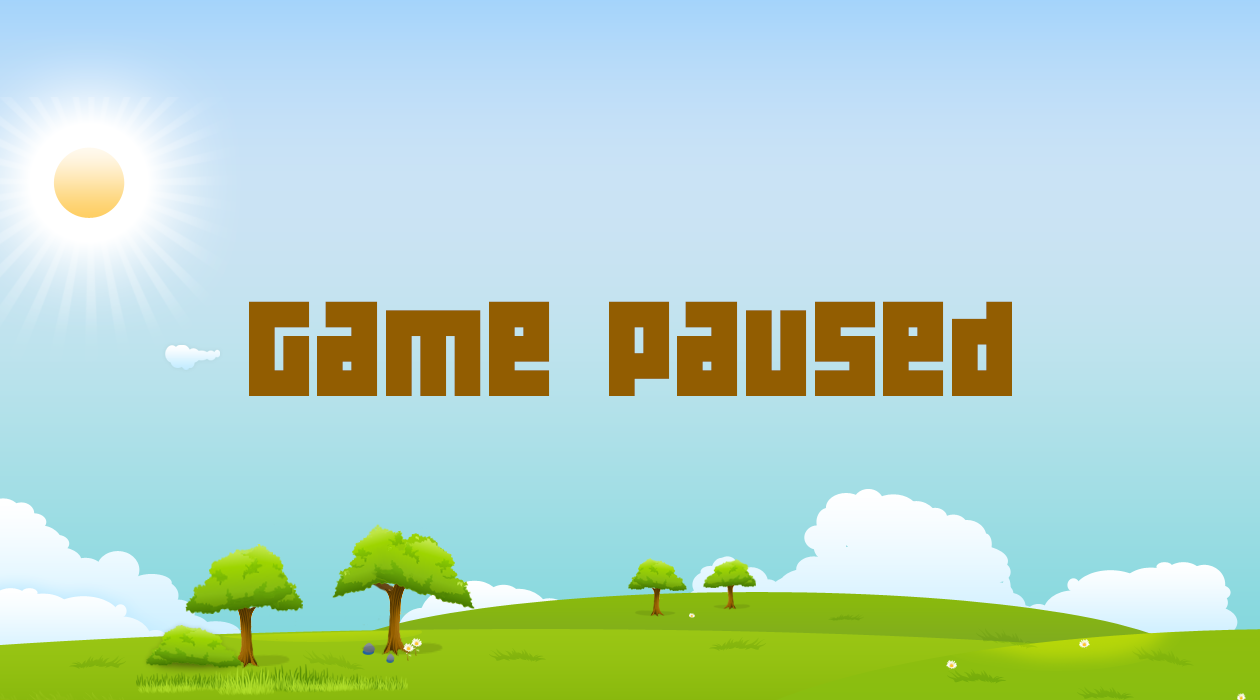
<style>
.page{position:relative;width:1260px;height:700px}
.page>*{position:absolute;margin:0}
.t1{font:120px "04b19";color:#925d01}
</style>
<div class="page">
<p class="t1" style="left:249px;top:301px;width:763px;height:95px">Game Paused</p>
</div>
